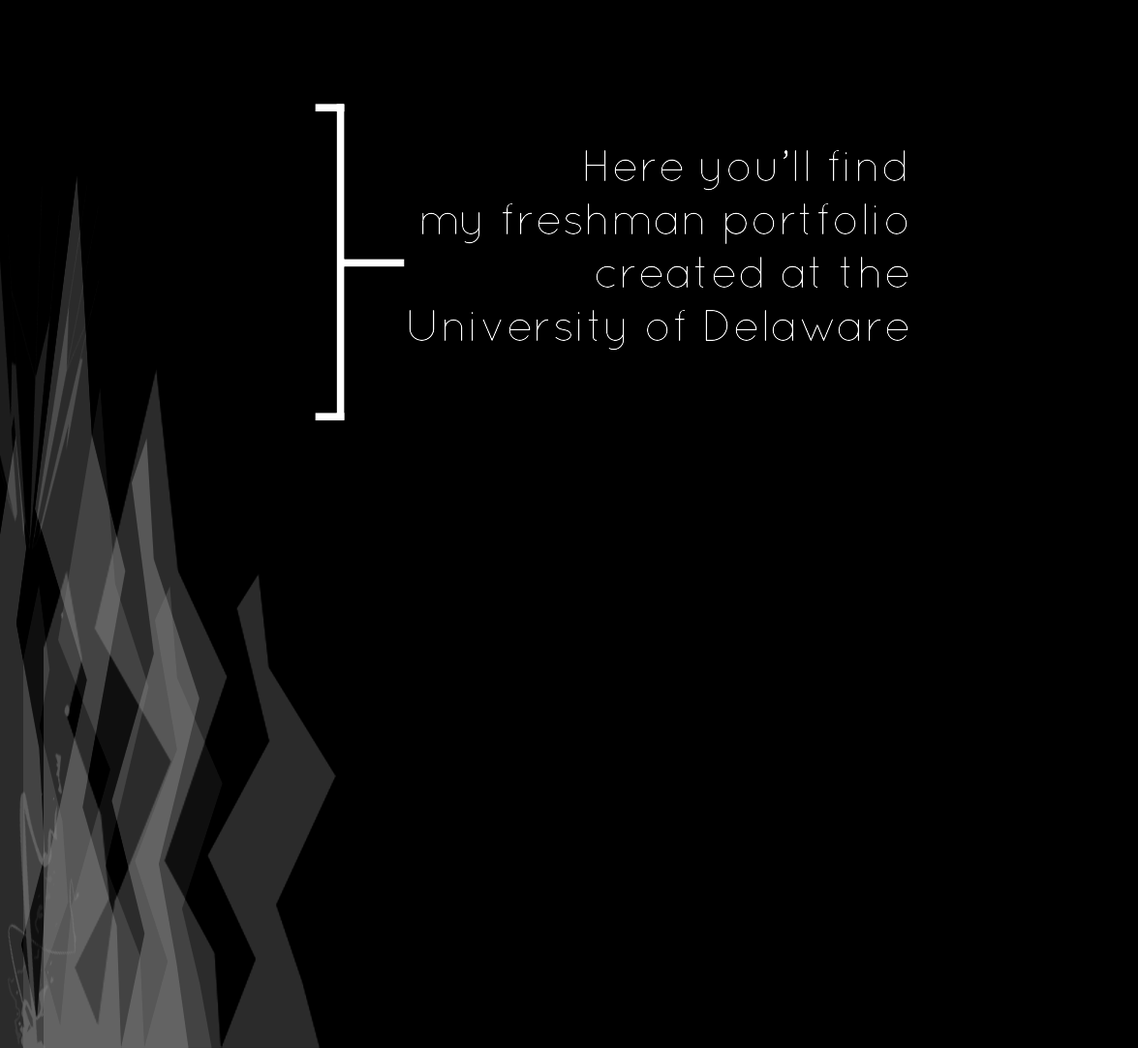
<style>
.page{position:relative;width:1138px;height:1048px;background:#000000}
.page>*{position:absolute;margin:0}
.t1{font:44.4px "QuicksandLight-Regular";color:#ffffff}
</style>
<div class="page">
<p class="t1" style="left:409px;top:150px;width:499px;height:201px;text-align:right">Here you’ll find<br>my freshman portfolio<br>created at the<br>University of Delaware</p>
</div>
